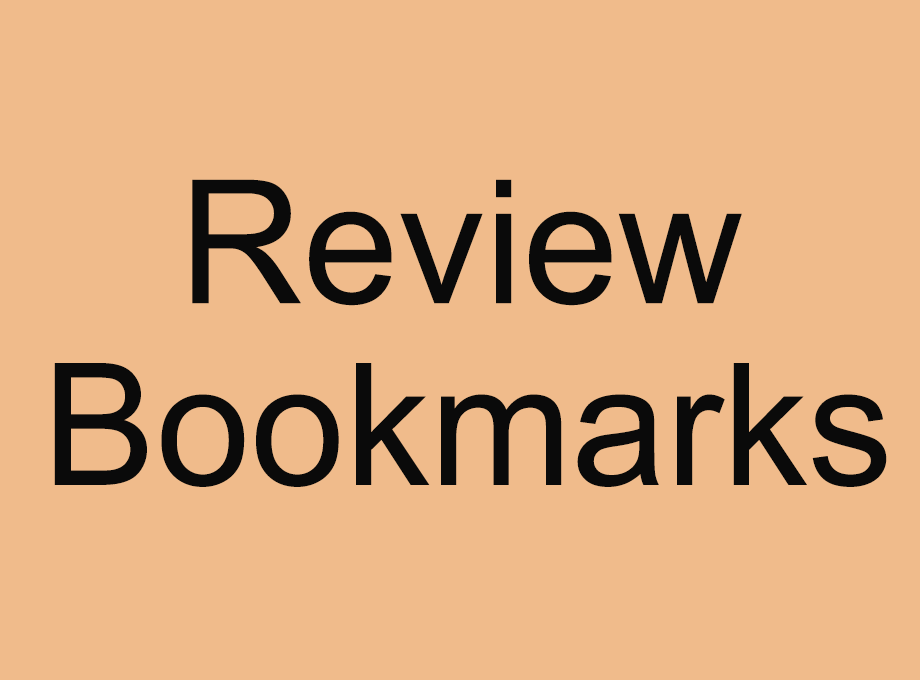
<style>
.page{position:relative;width:920px;height:680px;background:#f0bb8b}
.page>*{position:absolute;margin:0}
.t1{font:172px "ArialMT";color:#0a0a0a}
.t2{font:170px "ArialMT";color:#0a0a0a}
</style>
<div class="page">
<p class="t1" style="left:192px;top:179px;width:550px;height:127px">Review</p>
<p class="t2" style="left:54px;top:363px;width:833px;height:124px">Bookmarks</p>
</div>
